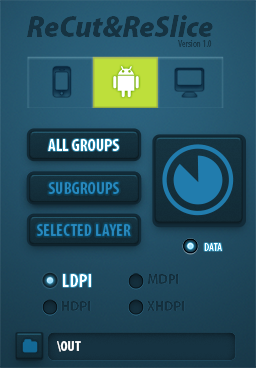
<style>
.page{position:relative;width:256px;height:368px}
.page>*{position:absolute;margin:0}
.t1{font:31.2px "MyriadPro-BlackSemiCnIt";color:#163342}
.t2{font:9.6px "MyriadPro-SemiboldCond";letter-spacing:-0.005em;color:#163342}
.t3{font:17.1px "MyriadPro-BoldCond";letter-spacing:0.01em;color:#ffffff;text-transform:uppercase}
.t4{font:17.1px "MyriadPro-BoldCond";letter-spacing:0.01em;color:#2887bb;text-transform:uppercase}
.t5{font:17.1px "MyriadPro-BoldCond";letter-spacing:0.01em;color:#2786ba;text-transform:uppercase}
.t6{font:11.2px "MyriadPro-SemiboldCond";letter-spacing:0.01em;color:#ffffff;text-transform:uppercase}
.t7{font:19.2px "MyriadPro-BoldCond";letter-spacing:0.01em;color:#ffffff;text-transform:uppercase}
.t8{font:14.4px "MyriadPro-BoldSemiCn";letter-spacing:0.01em;color:#163342;text-transform:uppercase}
.t9{font:14.4px "MyriadPro-BoldCond";letter-spacing:0.01em;color:#ffffff;text-transform:uppercase}
</style>
<div class="page">
<p class="t1" style="left:27px;top:15px;width:186px;height:22px">ReCut&amp;ReSlice</p>
<p class="t2" style="left:178px;top:40px;width:34px;height:7px;opacity:0.7">Version 1.0</p>
<p class="t3" style="left:48px;top:139px;width:71px;height:12px">All Groups</p>
<p class="t4" style="left:48px;top:182px;width:71px;height:12px">Subgroups</p>
<p class="t4" style="left:48px;top:182px;width:71px;height:12px">Subgroups</p>
<p class="t5" style="left:37px;top:224px;width:94px;height:12px">SELECTED LAYER</p>
<p class="t6" style="left:204px;top:243px;width:18px;height:8px">DATA</p>
<p class="t7" style="left:63px;top:274px;width:28px;height:13px">LDPI</p>
<p class="t8" style="left:147px;top:274px;width:32px;height:10px">MDPI</p>
<p class="t8" style="left:61px;top:301px;width:30px;height:10px">HDPI</p>
<p class="t8" style="left:147px;top:301px;width:38px;height:10px">XHDPI</p>
<p class="t9" style="left:57px;top:341px;width:24px;height:11px">\OUT</p>
</div>
